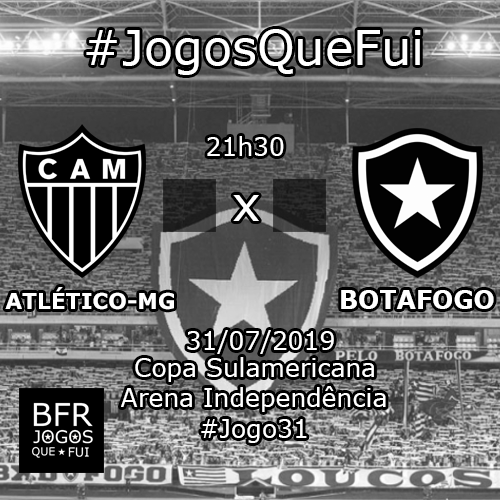
<style>
.page{position:relative;width:500px;height:500px}
.page>*{position:absolute;margin:0}
.t1{font:48px "Verdana";color:#ffffff}
.t2{font:25px "Verdana";color:#ffffff}
.t3{font:22px "Verdana-Bold";color:#ffffff}
.t4{font:25px "Verdana-Bold";color:#ffffff}
</style>
<div class="page">
<p class="t1" style="left:86px;top:29px;width:335px;height:46px">#JogosQueFui</p>
<p class="t2" style="left:207px;top:136px;width:77px;height:20px">21h30</p>
<p class="t1" style="left:233px;top:195px;width:26px;height:26px">x</p>
<p class="t3" style="left:5px;top:287px;width:169px;height:23px">ATLÉTICO-MG</p>
<p class="t4" style="left:341px;top:290px;width:153px;height:19px">BOTAFOGO</p>
<p class="t2" style="left:187px;top:330px;width:147px;height:24px">31/07/2019</p>
<p class="t2" style="left:135px;top:357px;width:239px;height:25px">Copa Sulamericana</p>
<p class="t2" style="left:121px;top:386px;width:265px;height:26px">Arena Independência</p>
<p class="t2" style="left:201px;top:419px;width:106px;height:24px">#Jogo31</p>
</div>
